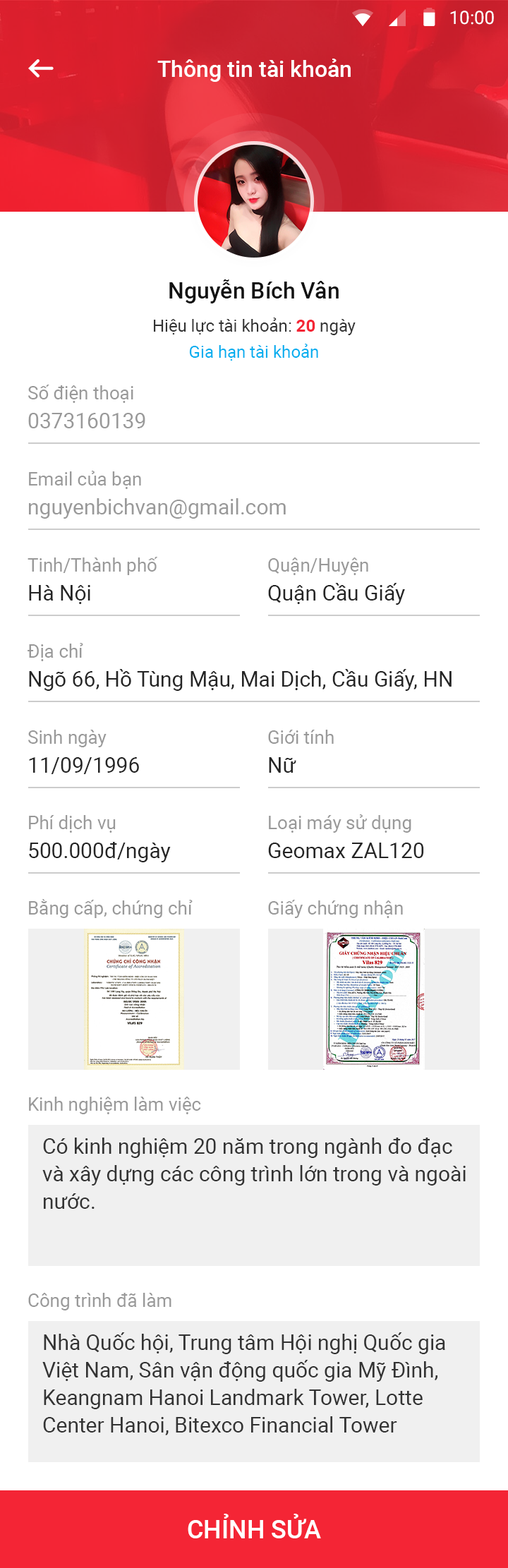
<style>
.page{position:relative;width:508px;height:1568px;background:#ffffff}
.page>*{position:absolute;margin:0}
.t1{font:18.3px "Roboto-Regular";color:#ffffff}
.t2{font:22.6px "Roboto-Medium";color:#ffffff}
.t3{font:22.6px "Roboto-Medium";color:#111111}
.t4{font:16.9px/26.1px "Roboto-Regular";color:#333333}
.t5{font:16.9px/26.1px "Roboto-Bold";color:#f42535}
.t6{font:16.9px/26.1px "Roboto-Regular";color:#00aeef}
.t7{font:18.3px "Roboto-Regular";color:#999999}
.t8{font:21.2px "Roboto-Regular";color:#999999}
.t9{font:21.2px "Roboto-Regular";color:#252525}
.t10{font:21.2px/27.5px "Roboto-Regular";color:#333333}
.t11{font:25.4px "Roboto-Medium";color:#ffffff;text-transform:uppercase}
</style>
<div class="page">
<p class="t1" style="left:450px;top:11px;width:44px;height:14px">10:00</p>
<p class="t2" style="left:157px;top:59px;width:194px;height:23px">Thông tin tài khoản</p>
<p class="t3" style="left:169px;top:279px;width:170px;height:24px">Nguyễn Bích Vân</p>
<p class="t4" style="left:154px;top:318px;width:202px;height:43px;text-align:center">Hiệu lực tài khoản: <span class="t5">20 </span>ngày<br><span class="t6">Gia hạn tài khoản</span></p>
<p class="t7" style="left:28px;top:385px;width:105px;height:18px">Số điện thoại</p>
<p class="t8" style="left:28px;top:413px;width:117px;height:15px">0373160139</p>
<p class="t7" style="left:29px;top:471px;width:112px;height:18px">Email của bạn</p>
<p class="t8" style="left:29px;top:498px;width:257px;height:21px">nguyenbichvan@gmail.com</p>
<p class="t7" style="left:28px;top:557px;width:130px;height:18px">Tinh/Thành phố</p>
<p class="t7" style="left:268px;top:557px;width:100px;height:18px">Quận/Huyện</p>
<p class="t9" style="left:29px;top:585px;width:61px;height:19px">Hà Nội</p>
<p class="t9" style="left:268px;top:583px;width:137px;height:22px">Quận Cầu Giấy</p>
<p class="t7" style="left:28px;top:643px;width:55px;height:18px">Địa chỉ</p>
<p class="t9" style="left:29px;top:669px;width:423px;height:22px">Ngõ 66, Hồ Tùng Mậu, Mai Dịch, Cầu Giấy, HN</p>
<p class="t7" style="left:28px;top:730px;width:79px;height:17px">Sinh ngày</p>
<p class="t7" style="left:268px;top:730px;width:66px;height:14px">Giới tính</p>
<p class="t9" style="left:29px;top:757px;width:110px;height:17px">11/09/1996</p>
<p class="t9" style="left:269px;top:757px;width:27px;height:16px">Nữ</p>
<p class="t7" style="left:29px;top:815px;width:87px;height:18px">Phí dịch vụ</p>
<p class="t7" style="left:269px;top:814px;width:142px;height:19px">Loại máy sử dụng</p>
<p class="t9" style="left:29px;top:842px;width:142px;height:20px">500.000đ/ngày</p>
<p class="t9" style="left:268px;top:843px;width:156px;height:15px">Geomax ZAL120</p>
<p class="t7" style="left:29px;top:899px;width:164px;height:19px">Bằng cấp, chứng chỉ</p>
<p class="t7" style="left:268px;top:900px;width:135px;height:18px">Giấy chứng nhận</p>
<p class="t7" style="left:29px;top:1097px;width:172px;height:17px">Kinh nghiệm làm việc</p>
<p class="t10" style="left:42px;top:1138px;width:424px;height:71px">Có kinh nghiệm 20 năm trong ngành đo đạc<br>và xây dựng các công trình lớn trong và ngoài<br>nước.</p>
<p class="t7" style="left:28px;top:1293px;width:143px;height:17px">Công trình đã làm</p>
<p class="t10" style="left:42px;top:1332px;width:403px;height:103px">Nhà Quốc hội, Trung tâm Hội nghị Quốc gia<br>Việt Nam, Sân vận động quốc gia Mỹ Đình, <br>Keangnam Hanoi Landmark Tower, Lotte<br>Center Hanoi, Bitexco Financial Tower</p>
<p class="t11" style="left:188px;top:1514px;width:133px;height:24px">chỉnh sửa</p>
</div>
